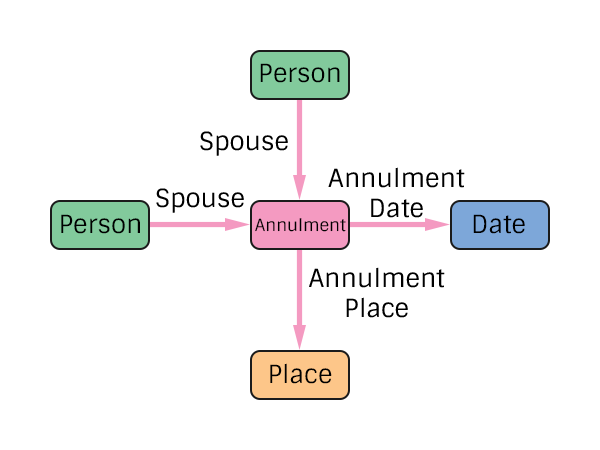
<style>
.page{position:relative;width:600px;height:450px;background:#ffffff}
.page>*{position:absolute;margin:0}
.t1{font:25px "Sintony";color:#000000}
.t2{font:16.7px "Sintony";color:#000000}
</style>
<div class="page">
<p class="t1" style="left:260px;top:63px;width:80px;height:20px">Person</p>
<p class="t1" style="left:200px;top:131px;width:88px;height:25px">Spouse</p>
<p class="t1" style="left:328px;top:167px;width:137px;height:51px;text-align:center">Annulment<br>Date</p>
<p class="t1" style="left:156px;top:188px;width:88px;height:25px">Spouse</p>
<p class="t1" style="left:61px;top:214px;width:79px;height:20px">Person</p>
<p class="t2" style="left:255px;top:218px;width:91px;height:14px">Annulment</p>
<p class="t1" style="left:473px;top:214px;width:52px;height:20px">Date</p>
<p class="t1" style="left:309px;top:267px;width:136px;height:51px;text-align:center">Annulment<br>Place</p>
<p class="t1" style="left:270px;top:363px;width:62px;height:21px">Place</p>
</div>
